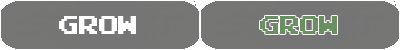
<style>
.page{position:relative;width:400px;height:50px;background:#757575}
.page>*{position:absolute;margin:0}
.t1{font:36px "ArcadeClassic";color:#ffffff}
.t2{font:36px "ArcadeClassic";color:#6a9061}
</style>
<div class="page">
<p class="t1" style="left:59px;top:16px;width:77px;height:18px">grow</p>
<p class="t2" style="left:260px;top:16px;width:77px;height:18px">grow</p>
</div>
